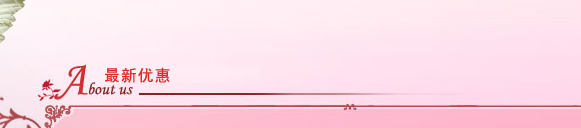
<style>
.page{position:relative;width:581px;height:128px}
.page>*{position:absolute;margin:0}
.t1{font:16px "SimHei";letter-spacing:0.05em;color:#df2b2c}
</style>
<div class="page">
<p class="t1" style="left:105px;top:67px;width:65px;height:16px">最新优惠</p>
</div>
